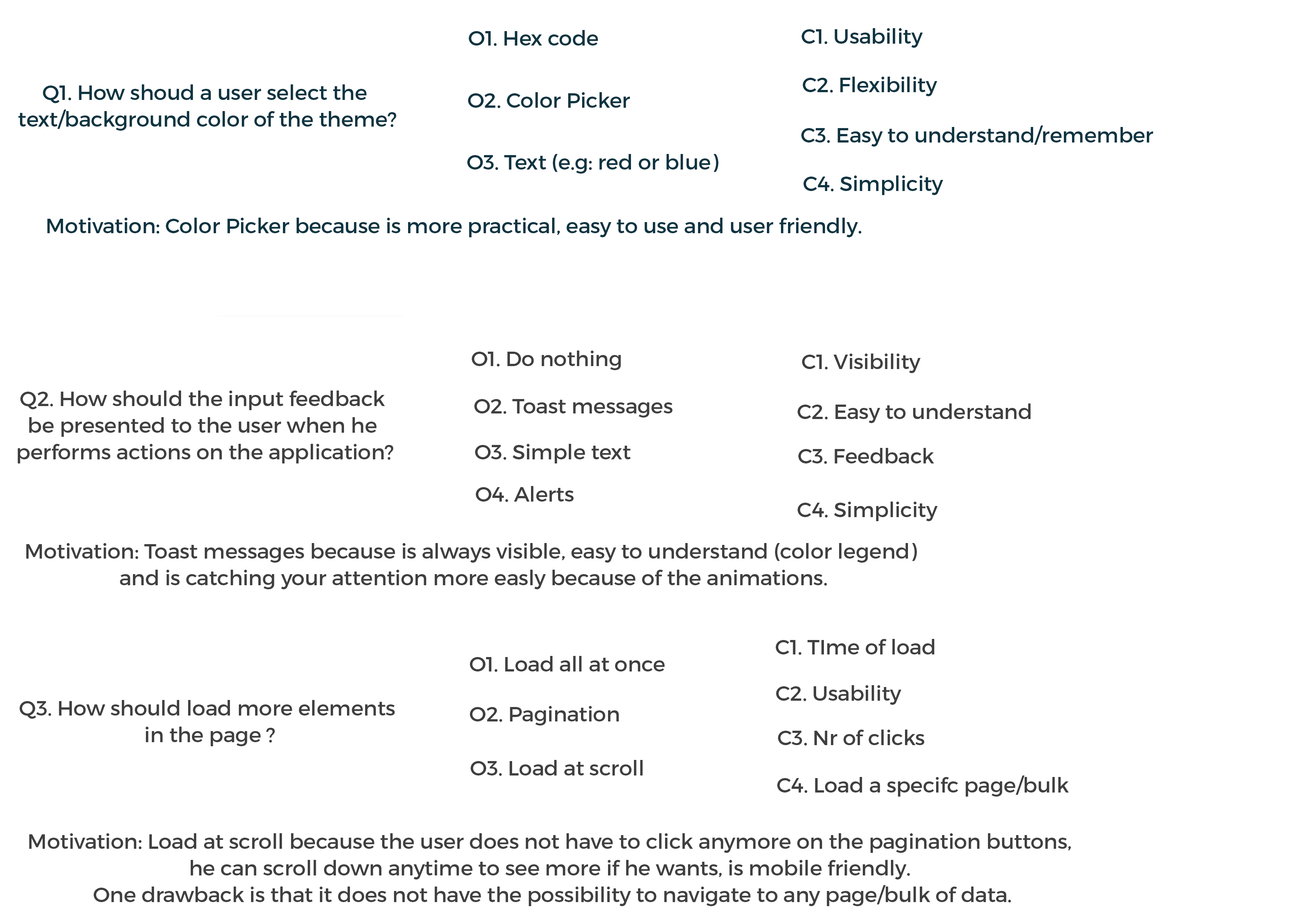
<style>
.page{position:relative;width:1299px;height:918px;background:#ffffff}
.page>*{position:absolute;margin:0}
.t1{font:20.7px "Montserrat-Regular";letter-spacing:-0.01em;color:#0e3441}
.t2{font:20.7px/8.9px "Montserrat-Regular";letter-spacing:-0.01em;color:#0e3441}
.t3{font:20.7px "Montserrat-Regular";letter-spacing:-0.01em;color:#3f3f3f}
.t4{font:20.7px/8.9px "Montserrat-Regular";letter-spacing:-0.01em;color:#3f3f3f}
</style>
<div class="page">
<p class="t1" style="left:469px;top:30px;width:129px;height:16px">O1. Hex code</p>
<p class="t1" style="left:802px;top:28px;width:121px;height:20px">C1. Usability</p>
<p class="t1" style="left:803px;top:77px;width:134px;height:19px">C2. Flexibility</p>
<p class="t2" style="left:18px;top:84px;width:378px;height:47px;text-align:center">Q1. How shoud a user select the <br><br><br>text/background color of the theme?</p>
<p class="t1" style="left:468px;top:92px;width:162px;height:16px">O2. Color Picker</p>
<p class="t1" style="left:801px;top:126px;width:352px;height:21px">C3. Easy to understand/remember</p>
<p class="t1" style="left:467px;top:154px;width:251px;height:20px">O3. Text (e.g: red or blue)</p>
<p class="t1" style="left:803px;top:175px;width:140px;height:20px">C4. Simplicity</p>
<p class="t1" style="left:47px;top:218px;width:814px;height:19px">Motivation: Color Picker because is more practical, easy to use and user friendly.</p>
<p class="t3" style="left:472px;top:351px;width:149px;height:19px">O1. Do nothing</p>
<p class="t3" style="left:802px;top:354px;width:118px;height:19px">C1. Visibility</p>
<p class="t4" style="left:18px;top:391px;width:375px;height:73px;text-align:center">Q2. How should the input feedback <br><br><br>be presented to the user when he <br><br><br>performs actions on the application?</p>
<p class="t3" style="left:474px;top:399px;width:198px;height:19px">O2. Toast messages</p>
<p class="t3" style="left:797px;top:404px;width:233px;height:19px">C2. Easy to understand</p>
<p class="t3" style="left:475px;top:444px;width:155px;height:20px">O3. Simple text</p>
<p class="t3" style="left:798px;top:448px;width:136px;height:16px">C3. Feedback</p>
<p class="t3" style="left:476px;top:486px;width:97px;height:16px">O4. Alerts</p>
<p class="t3" style="left:797px;top:502px;width:140px;height:19px">C4. Simplicity</p>
<p class="t4" style="left:26px;top:543px;width:891px;height:46px;text-align:center">Motivation: Toast messages because is always visible, easy to understand (color legend) <br><br><br>and is catching your attention more easly because of the animations.</p>
<p class="t3" style="left:776px;top:639px;width:158px;height:16px">C1. TIme of load</p>
<p class="t3" style="left:470px;top:656px;width:195px;height:16px">O1. Load all at once</p>
<p class="t3" style="left:776px;top:685px;width:125px;height:20px">C2. Usability</p>
<p class="t4" style="left:20px;top:700px;width:375px;height:46px;text-align:center">Q3. How should load more elements<br><br><br> in the page ?</p>
<p class="t3" style="left:470px;top:706px;width:149px;height:20px">O2. Pagination</p>
<p class="t3" style="left:778px;top:730px;width:146px;height:16px">C3. Nr of clicks</p>
<p class="t3" style="left:471px;top:760px;width:172px;height:16px">O3. Load at scroll</p>
<p class="t3" style="left:777px;top:776px;width:292px;height:21px">C4. Load a specifc page/bulk</p>
<p class="t4" style="left:29px;top:833px;width:1042px;height:73px;text-align:center">Motivation: Load at scroll because the user does not have to click anymore on the pagination buttons, <br><br><br>he can scroll down anytime to see more if he wants, is mobile friendly. <br><br><br>One drawback is that it does not have the possibility to navigate to any page/bulk of data.</p>
</div>
